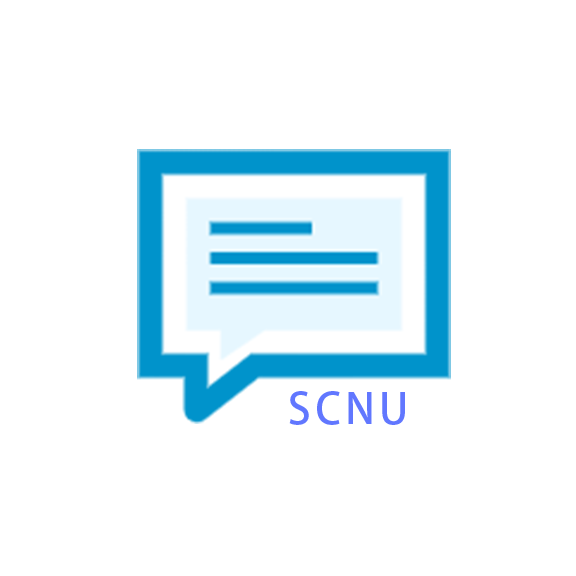
<style>
.page{position:relative;width:576px;height:576px;background:#ffffff}
.page>*{position:absolute;margin:0}
.t1{font:42px "AdobeHeitiStd-Regular";letter-spacing:0.1em;color:#6177ff}
</style>
<div class="page">
<p class="t1" style="left:289px;top:391px;width:116px;height:34px">SCNU</p>
</div>
